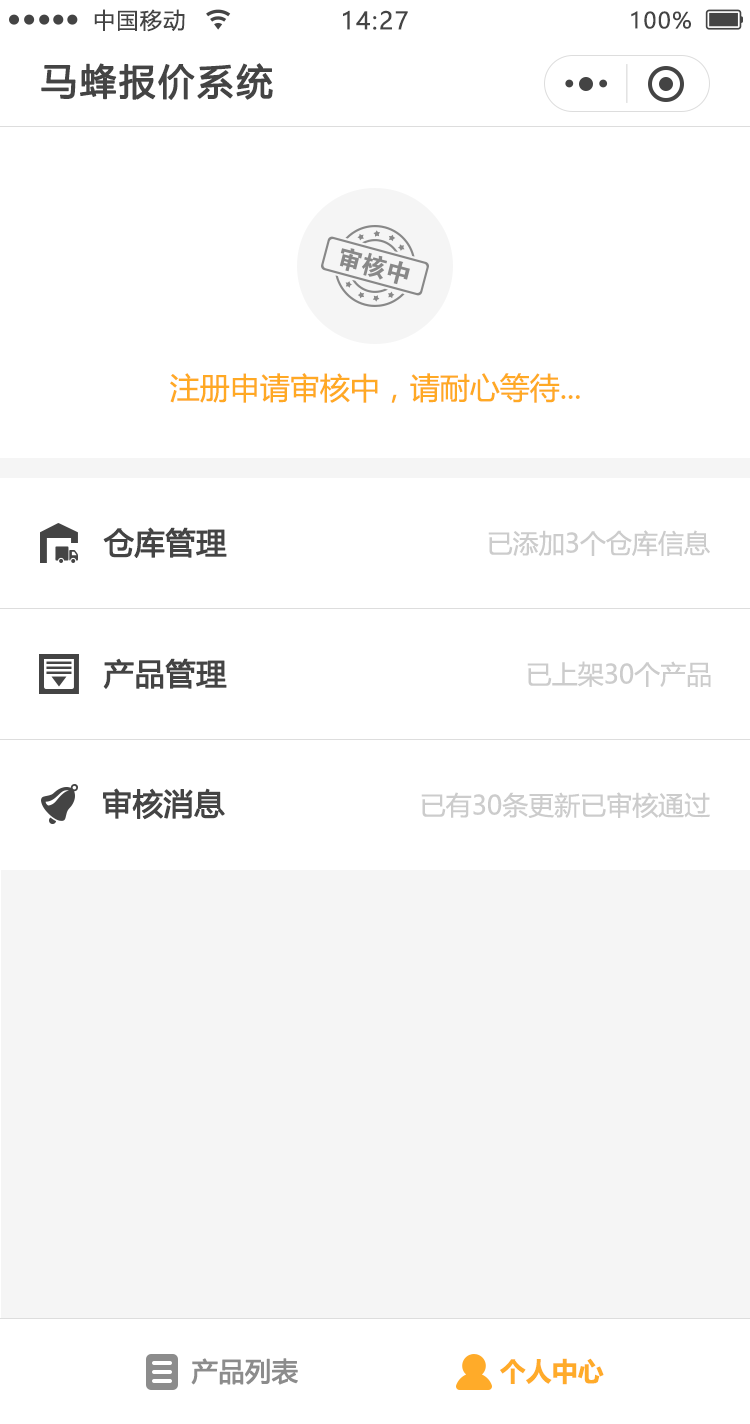
<style>
.page{position:relative;width:750px;height:1424px;background:#ffffff}
.page>*{position:absolute;margin:0}
.t1{font:22px "MicrosoftYaHeiUI";letter-spacing:0.06em;color:#444444}
.t2{font:24px "MicrosoftYaHeiUI";letter-spacing:0.06em;color:#444444}
.t3{font:36px "MicrosoftYaHeiUI";letter-spacing:0.06em;color:#444444;font-weight:bold}
.t4{font:30px "MicrosoftYaHeiUI";color:#ffa924}
.t5{font:30px "MicrosoftYaHeiUI";color:#444444;font-weight:bold}
.t6{font:26px "MicrosoftYaHeiUI";color:#cccccc}
.t7{font:26px "MicrosoftYaHeiUI";color:#8c8c8c;font-weight:bold}
.t8{font:26px "MicrosoftYaHeiUI-Bold";color:#ffab29}
</style>
<div class="page">
<p class="t1" style="left:94px;top:9px;width:91px;height:23px">中国移动</p>
<p class="t2" style="left:343px;top:10px;width:65px;height:20px">14:27</p>
<p class="t1" style="left:631px;top:11px;width:60px;height:18px">100%</p>
<p class="t3" style="left:41px;top:63px;width:232px;height:37px">马蜂报价系统</p>
<p class="t4" style="left:170px;top:373px;width:410px;height:30px">注册申请审核中，请耐心等待...</p>
<p class="t5" style="left:103px;top:527px;width:124px;height:31px">仓库管理</p>
<p class="t6" style="left:488px;top:530px;width:222px;height:26px">已添加3个仓库信息</p>
<p class="t5" style="left:103px;top:658px;width:124px;height:31px">产品管理</p>
<p class="t6" style="left:527px;top:661px;width:184px;height:26px">已上架30个产品</p>
<p class="t5" style="left:103px;top:788px;width:122px;height:32px">审核消息</p>
<p class="t6" style="left:421px;top:792px;width:289px;height:27px">已有30条更新已审核通过</p>
<p class="t7" style="left:191px;top:1358px;width:107px;height:27px">产品列表</p>
<p class="t8" style="left:500px;top:1358px;width:104px;height:27px">个人中心</p>
</div>
